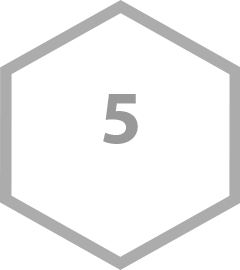
<style>
.page{position:relative;width:240px;height:270px;background:#ffffff}
.page>*{position:absolute;margin:0}
.t1{font:75px "MyriadPro-Bold";color:#999999}
</style>
<div class="page">
<p class="t1" style="left:103px;top:94px;width:35px;height:50px">5</p>
</div>
